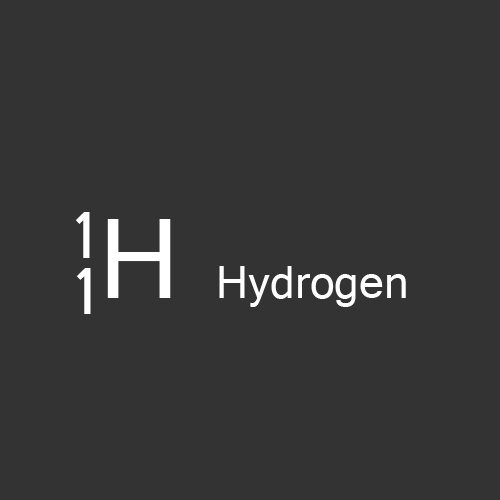
<style>
.page{position:relative;width:500px;height:500px;background:#333333}
.page>*{position:absolute;margin:0}
.t1{font:48px "Gautami";color:#ffffff}
.t2{font:120px "Gautami";color:#ffffff}
</style>
<div class="page">
<p class="t1" style="left:75px;top:212px;width:331px;height:95px"><span class="t2">1H </span>Hydrogen</p>
<p class="t2" style="left:76px;top:268px;width:15px;height:46px">1</p>
</div>
